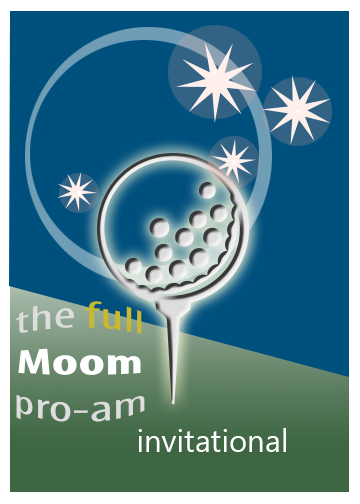
<style>
.page{position:relative;width:360px;height:504px;background:#00507e}
.page>*{position:absolute;margin:0}
.t1{font:31.1px "MyriadPro-Cond";color:#dddddd;scale:1.86 1}
.t2{font:31.1px "MyriadPro-Cond";color:#cbb92d;scale:1.86 1}
.t3{font:31.1px "MyriadPro-BoldCond";color:#ffffff;scale:1.86 1}
.t4{font:31.6px "MyanmarText";color:#ffffff}
</style>
<div class="page">
<p class="t1" style="left:16px;top:301px;width:129px;height:121px;text-align:center">the <span class="t2">full<br></span><span class="t3">Moom<br></span>pro-am</p>
<p class="t4" style="left:138px;top:428px;width:148px;height:24px">invitational</p>
</div>
